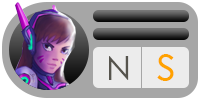
<style>
.page{position:relative;width:200px;height:100px;background:#a6a6a6}
.page>*{position:absolute;margin:0}
.t1{font:50.7px "CenturyGothic";color:#ffa200}
.t2{font:34.5px "CenturyGothic";color:#56544d}
</style>
<div class="page">
<p class="t1" style="left:157px;top:54px;width:17px;height:27px">s</p>
<p class="t2" style="left:109px;top:56px;width:20px;height:24px">N</p>
</div>
